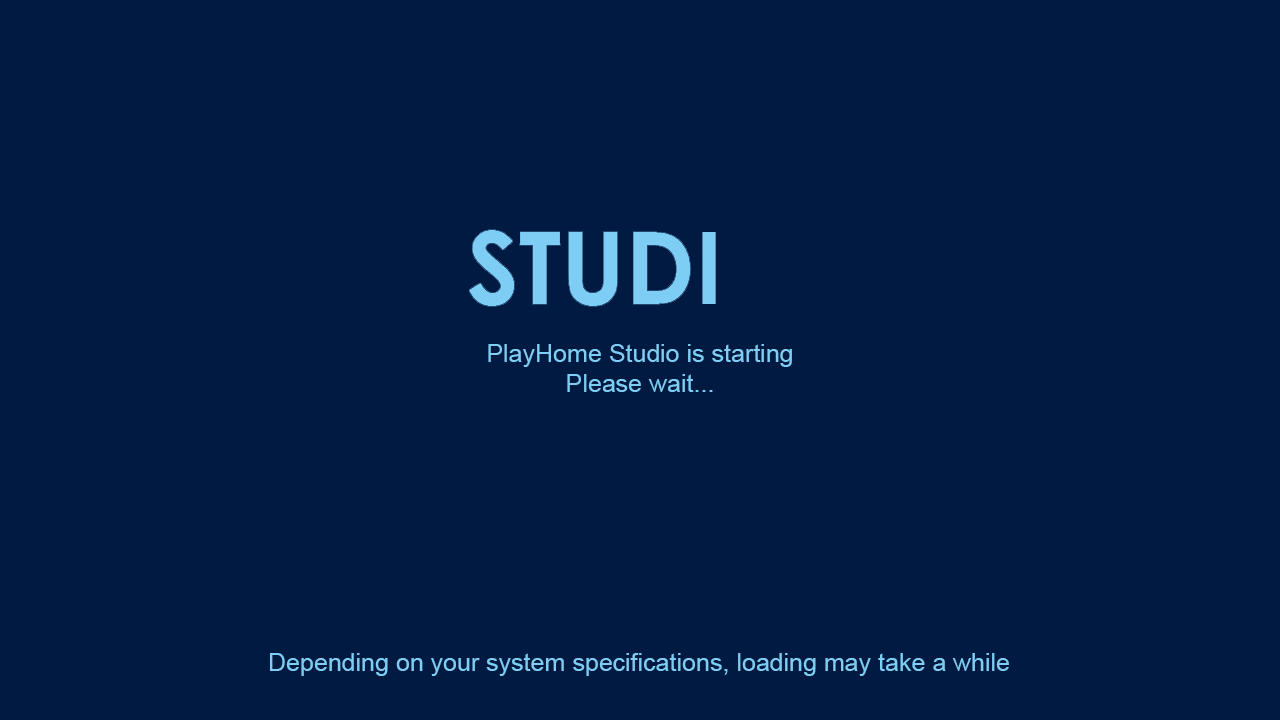
<style>
.page{position:relative;width:1280px;height:720px;background:#001a41}
.page>*{position:absolute;margin:0}
.t1{font:25px "ArialMT";color:#7ecdf4}
</style>
<div class="page">
<p class="t1" style="left:488px;top:344px;width:304px;height:48px;text-align:center">PlayHome Studio is starting<br>Please wait...</p>
<p class="t1" style="left:270px;top:653px;width:739px;height:23px">Depending on your system specifications, loading may take a while</p>
</div>
